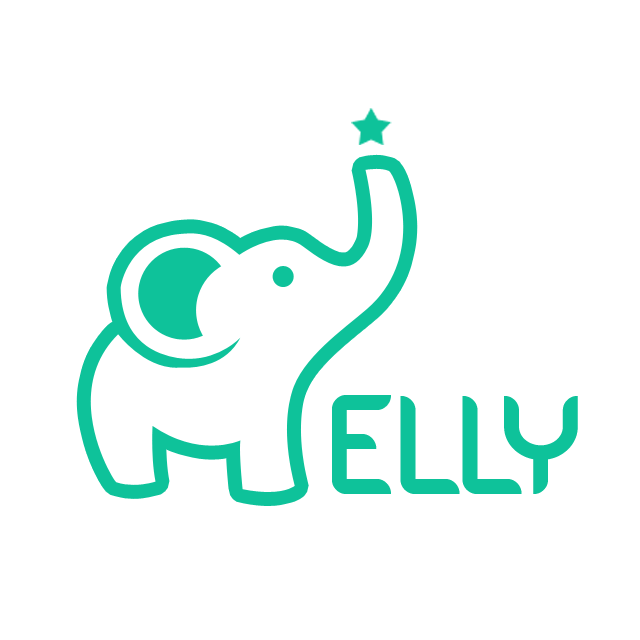
<style>
.page{position:relative;width:640px;height:640px;background:#ffffff}
.page>*{position:absolute;margin:0}
.t1{font:153.1px "Urba-Regular";color:#0ec29a}
</style>
<div class="page">
<p class="t1" style="left:332px;top:395px;width:246px;height:99px">ELLY</p>
</div>
